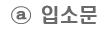
<style>
.page{position:relative;width:104px;height:30px;background:#ffffff}
.page>*{position:absolute;margin:0}
.t1{font:19px "HeadlineR-HM";color:#6a6a6a;scale:1.12 1}
.t2{font:19.6px "H2hdrM";color:#6a6a6a}
</style>
<div class="page">
<p class="t1" style="left:11px;top:6px;width:20px;height:18px">ⓐ</p>
<p class="t2" style="left:42px;top:5px;width:55px;height:19px">입소문</p>
</div>
